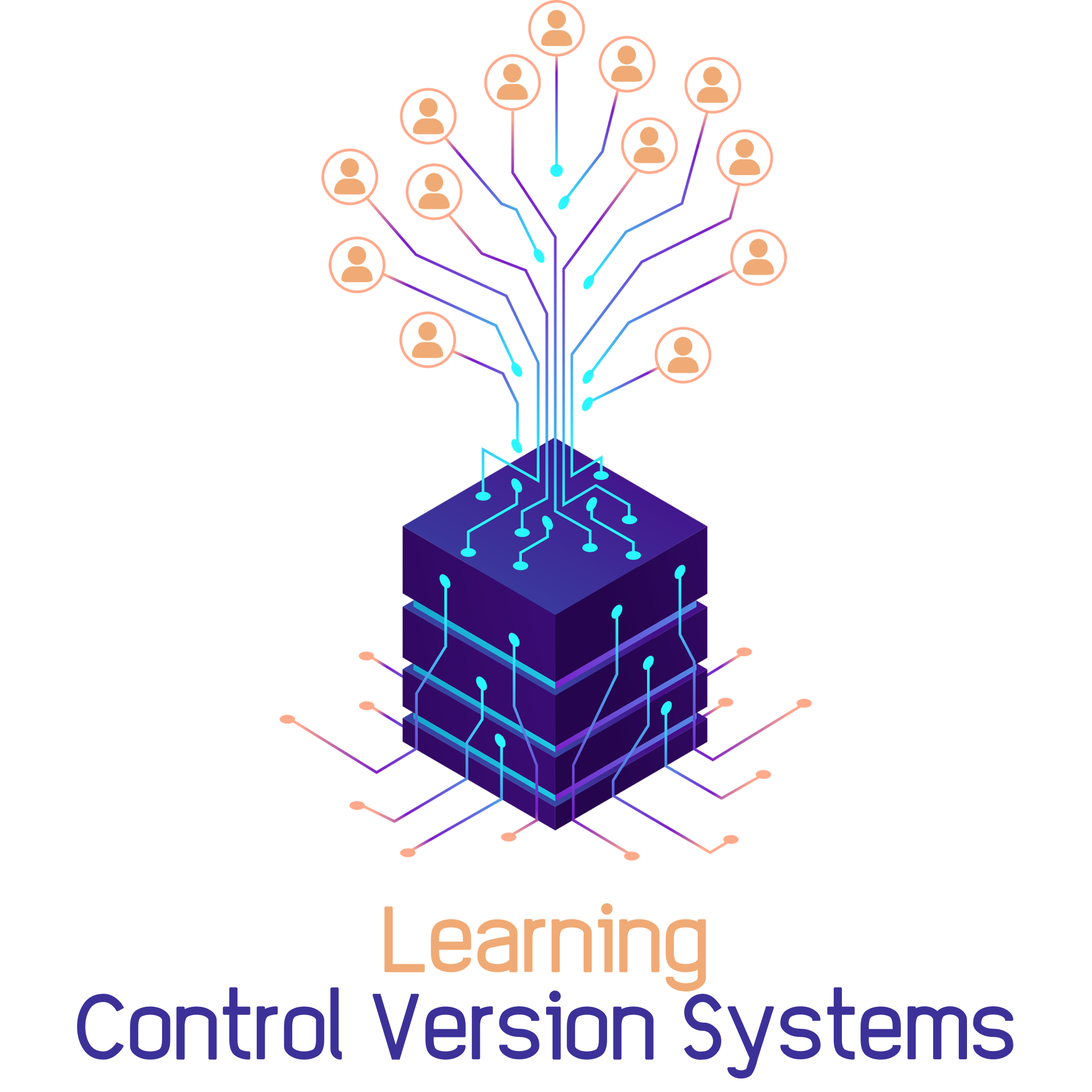
<style>
.page{position:relative;width:1092px;height:1092px;background:#ffffff}
.page>*{position:absolute;margin:0}
.t1{font:65.5px/87.4px "EleganTech";color:#3c3199;font-weight:bold}
.t2{font:65.5px/87.4px "EleganTech";color:#f0aa75;font-weight:bold}
</style>
<div class="page">
<p class="t1" style="left:77px;top:903px;width:936px;height:176px;text-align:center"><span class="t2">Learning<br></span>Control Version Systems</p>
</div>
